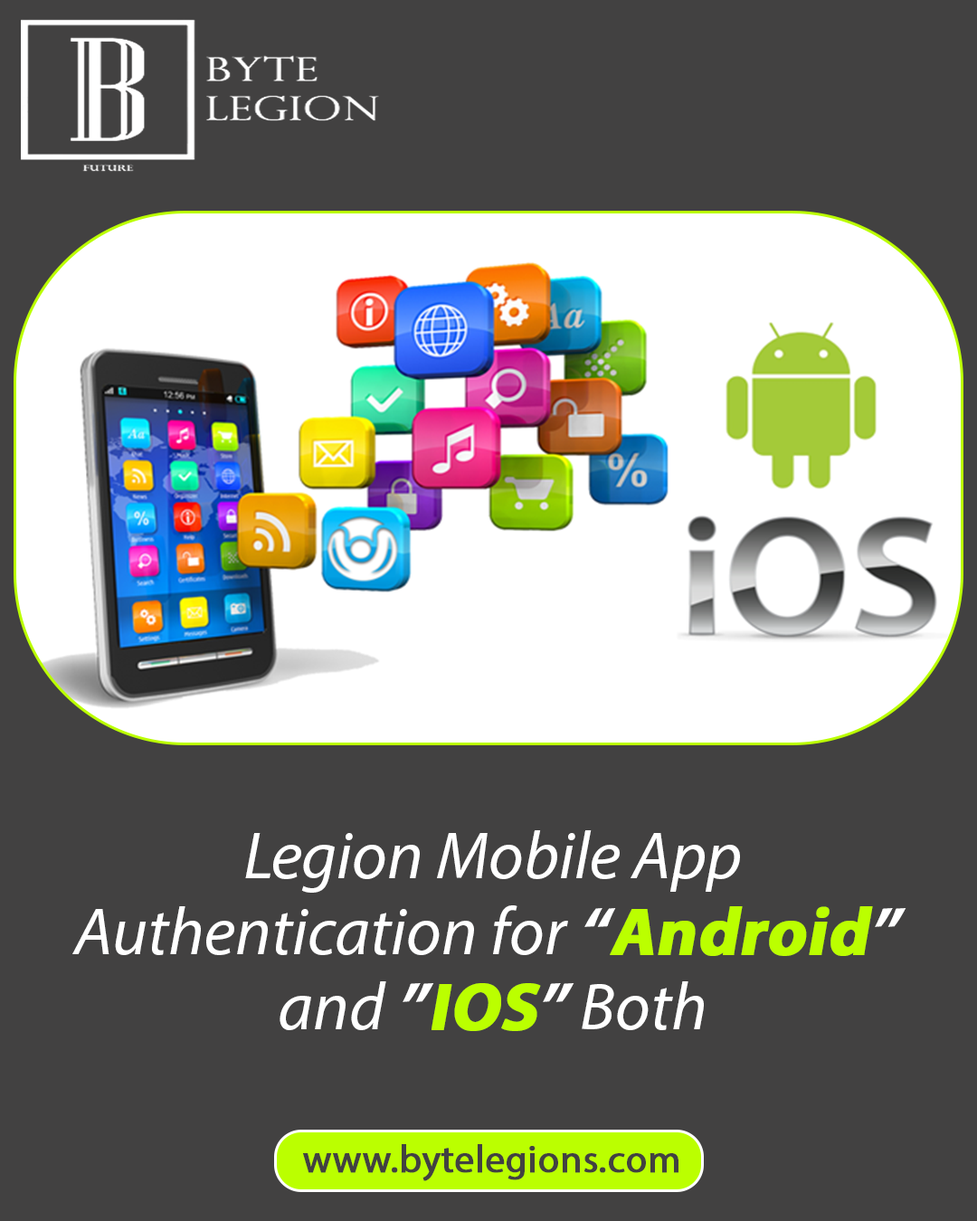
<style>
.page{position:relative;width:977px;height:1221px;background:#424141}
.page>*{position:absolute;margin:0}
.t1{font:67.3px/75.4px "MyriadPro-It";color:#ffffff}
.t2{font:67.3px/75.4px "MyriadPro-Bold";color:#ffffff;font-style:italic}
.t3{font:67.3px/75.4px "MyriadPro-Bold";color:#bbff00;font-weight:bold;font-style:italic}
.t4{font:38.6px "MyriadPro-Regular";color:#424141;font-weight:bold}
</style>
<div class="page">
<p class="t1" style="left:72px;top:830px;width:834px;height:201px;text-align:center">Legion Mobile App<br>Authentication for <span class="t2">“</span><span class="t3">Android</span><span class="t2">”</span> <br>and <span class="t2">”</span><span class="t3">IOS</span><span class="t2">”</span> Both</p>
<p class="t4" style="left:303px;top:1144px;width:375px;height:37px">www.bytelegions.com</p>
</div>
